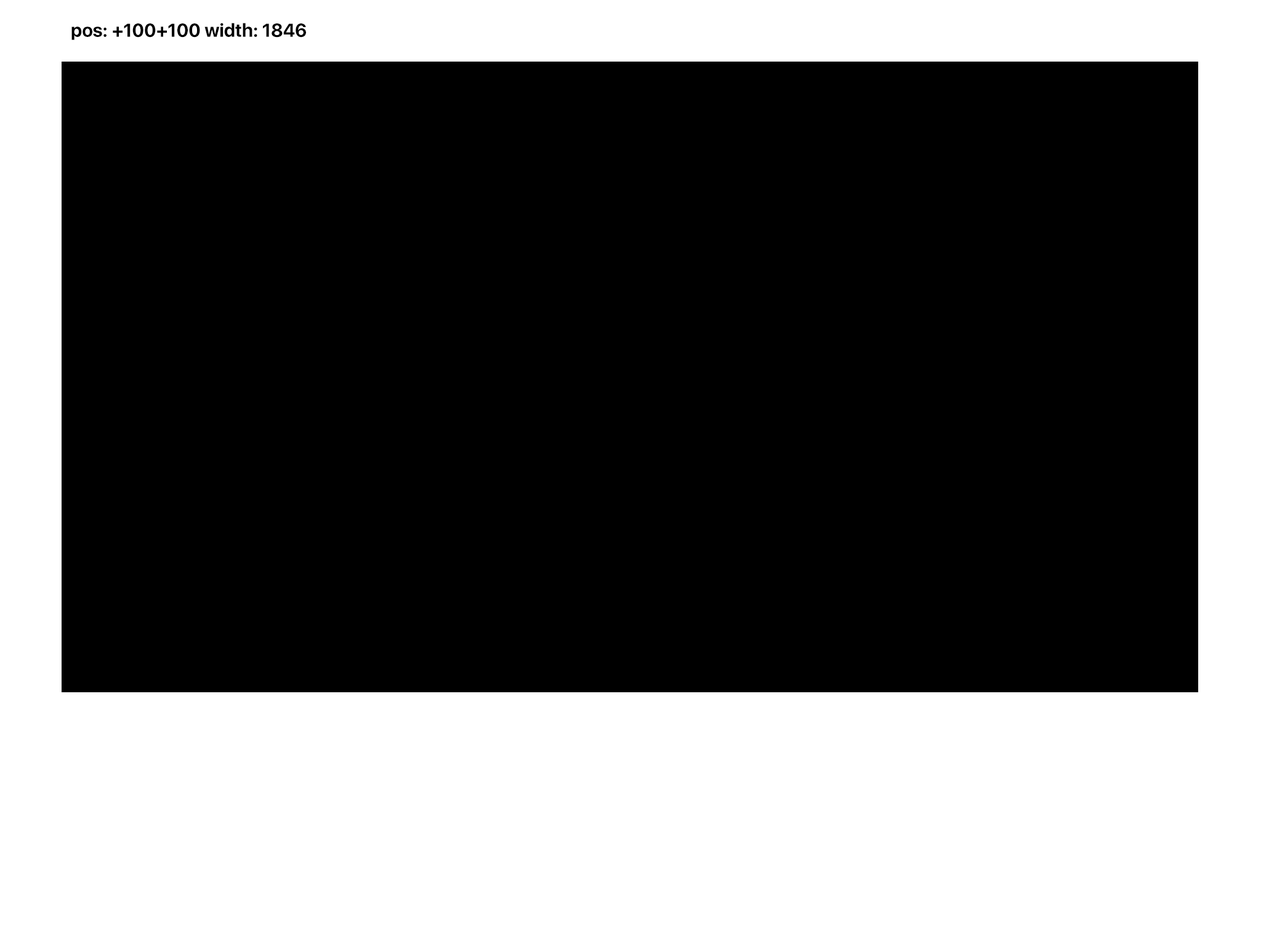
<style>
.page{position:relative;width:1261px;height:946px;background:#000000}
.page>*{position:absolute;margin:0}
.t1{font:18.5px "SFUIDisplay-Bold";color:#000000}
</style>
<div class="page">
<p class="t1" style="left:71px;top:23px;width:235px;height:17px">pos: +100+100 width: 1846</p>
</div>
